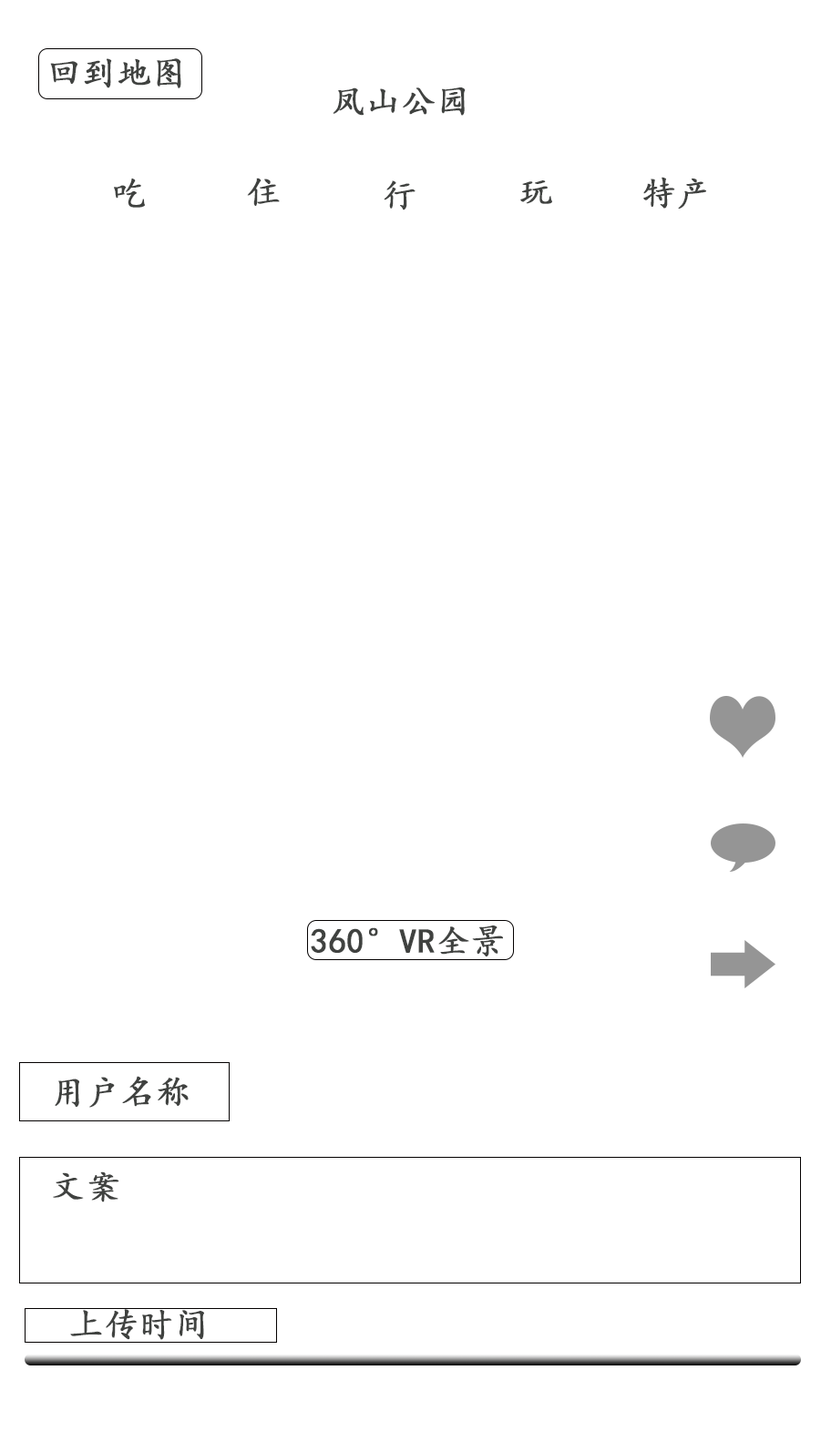
<style>
.page{position:relative;width:821px;height:1452px;background:#ffffff}
.page>*{position:absolute;margin:0}
.t1{font:34.2px "KaiTi";color:#404240;font-weight:bold}
</style>
<div class="page">
<p class="t1" style="left:50px;top:58px;width:131px;height:30px">回到地图图</p>
<p class="t1" style="left:333px;top:87px;width:133px;height:29px">凤山公园</p>
<p class="t1" style="left:114px;top:179px;width:31px;height:29px">吃</p>
<p class="t1" style="left:247px;top:178px;width:33px;height:28px">住</p>
<p class="t1" style="left:384px;top:180px;width:32px;height:30px">行</p>
<p class="t1" style="left:520px;top:180px;width:32px;height:24px">玩</p>
<p class="t1" style="left:643px;top:177px;width:63px;height:32px">特产</p>
<p class="t1" style="left:311px;top:926px;width:192px;height:31px">360°VR全景</p>
<p class="t1" style="left:55px;top:1076px;width:134px;height:32px">用户名称</p>
<p class="t1" style="left:53px;top:1172px;width:66px;height:31px">文案</p>
<p class="t1" style="left:70px;top:1309px;width:134px;height:31px">上传时间</p>
</div>
